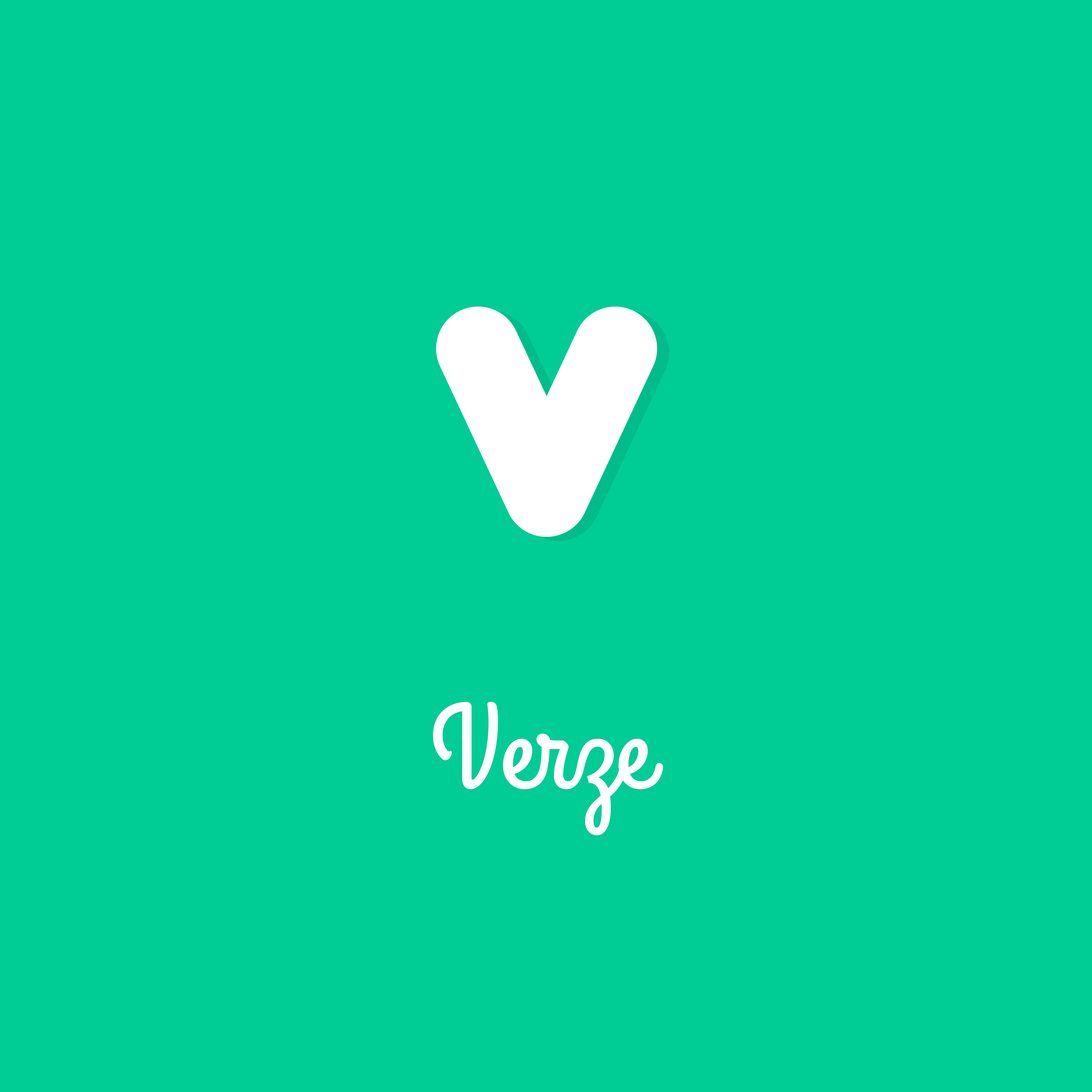
<style>
.page{position:relative;width:1092px;height:1092px;background:#00cc96}
.page>*{position:absolute;margin:0}
.t1{font:119.9px "GrandHotel-Regular";color:#ffffff}
</style>
<div class="page">
<p class="t1" style="left:433px;top:701px;width:230px;height:134px">Verze</p>
</div>
